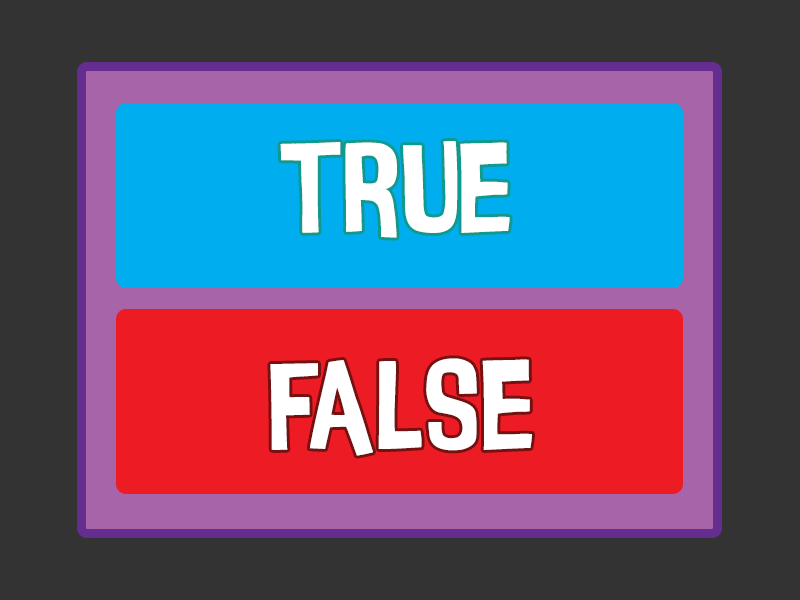
<style>
.page{position:relative;width:800px;height:600px;background:#333333}
.page>*{position:absolute;margin:0}
.t1{font:130px "InsideOut";color:#ffffff}
</style>
<div class="page">
<p class="t1" style="left:280px;top:141px;width:230px;height:97px">true</p>
<p class="t1" style="left:270px;top:358px;width:262px;height:98px">false</p>
</div>
